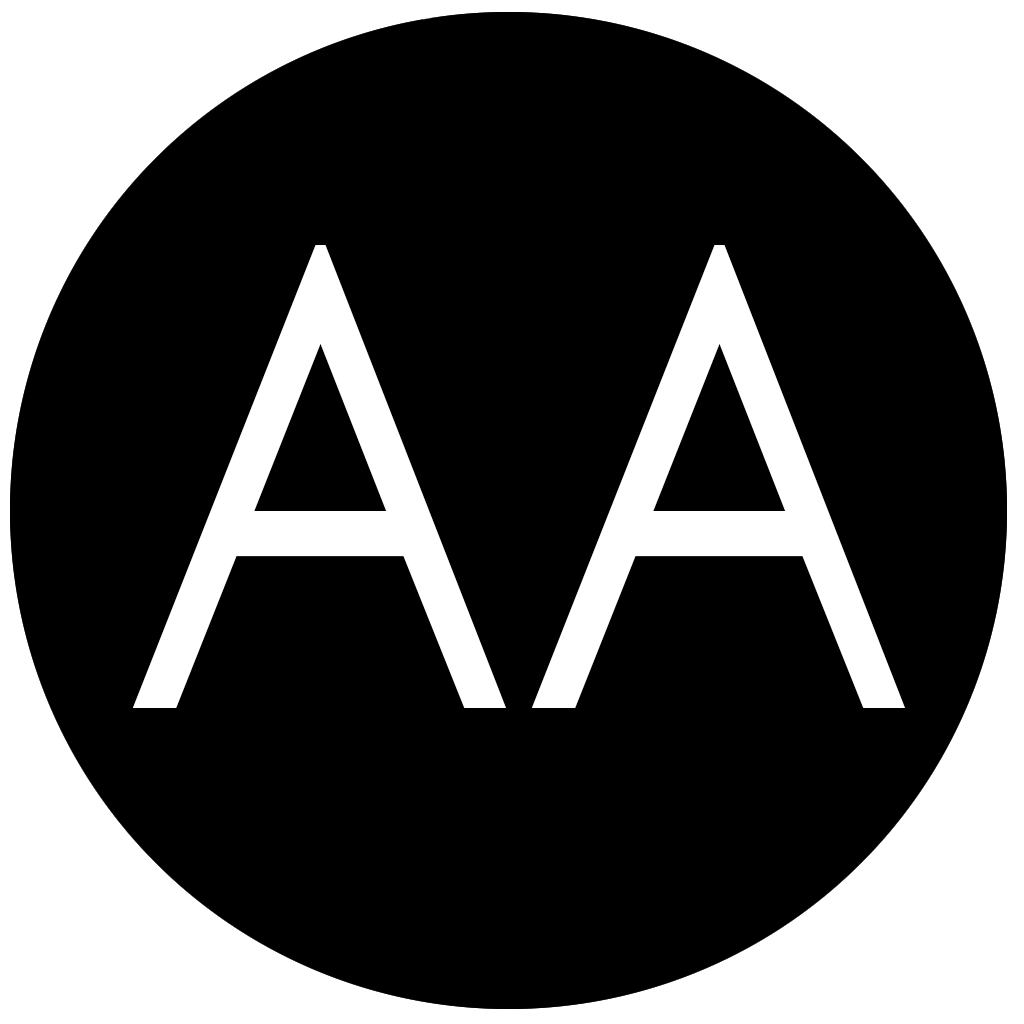
<style>
.page{position:relative;width:1024px;height:1024px;background:#000000}
.page>*{position:absolute;margin:0}
.t1{font:620px "STHeitiSC-Light";color:#ffffff;scale:0.87 1}
</style>
<div class="page">
<p class="t1" style="left:132px;top:245px;width:773px;height:463px">AA</p>
</div>
